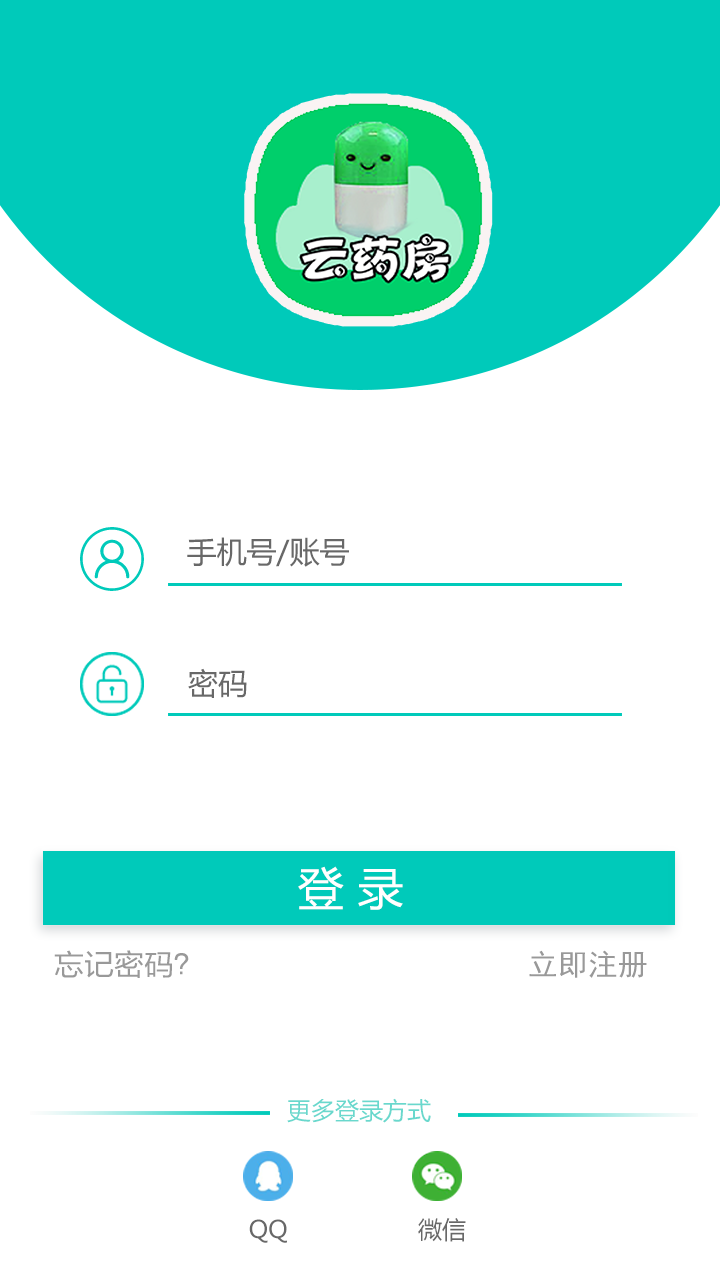
<style>
.page{position:relative;width:720px;height:1278px;background:#ffffff}
.page>*{position:absolute;margin:0}
.t1{font:30px "MicrosoftYaHei";color:#686868}
.t2{font:46px "MicrosoftYaHei";color:#ffffff}
.t3{font:29.5px "FZLTH3K--GBK1-0";color:#999999}
.t4{font:29.5px "SimHei";color:#999999}
.t5{font:24px "MicrosoftYaHei";color:#69d8cd}
.t6{font:24px "MicrosoftYaHei";color:#686868}
</style>
<div class="page">
<p class="t1" style="left:187px;top:537px;width:162px;height:30px">手机号/账号</p>
<p class="t1" style="left:188px;top:668px;width:59px;height:30px">密码</p>
<p class="t2" style="left:298px;top:866px;width:105px;height:44px">登 录</p>
<p class="t3" style="left:54px;top:950px;width:135px;height:28px">忘记密码？</p>
<p class="t4" style="left:529px;top:950px;width:118px;height:28px">立即注册</p>
<p class="t5" style="left:287px;top:1098px;width:144px;height:25px">更多登录方式</p>
<p class="t6" style="left:249px;top:1219px;width:38px;height:24px">QQ</p>
<p class="t6" style="left:418px;top:1218px;width:48px;height:24px">微信</p>
</div>
